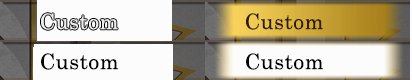
<style>
.page{position:relative;width:412px;height:80px;background:#fcfcfc}
.page>*{position:absolute;margin:0}
.t1{font:21.3px "CenturySchoolbook";letter-spacing:0.025em;color:#321a02}
.t2{font:21.3px "CenturySchoolbook";letter-spacing:0.025em;color:#000000}
</style>
<div class="page">
<p class="t1" style="left:246px;top:13px;width:77px;height:17px">Custom</p>
<p class="t2" style="left:41px;top:53px;width:77px;height:17px">Custom</p>
<p class="t2" style="left:246px;top:53px;width:77px;height:17px">Custom</p>
</div>
